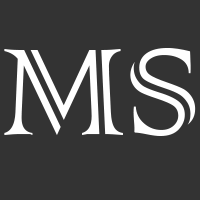
<style>
.page{position:relative;width:200px;height:200px;background:#333333}
.page>*{position:absolute;margin:0}
.t1{font:163.6px "ColonnaMT";color:#ffffff}
</style>
<div class="page">
<p class="t1" style="left:4px;top:48px;width:192px;height:88px">MS</p>
</div>
